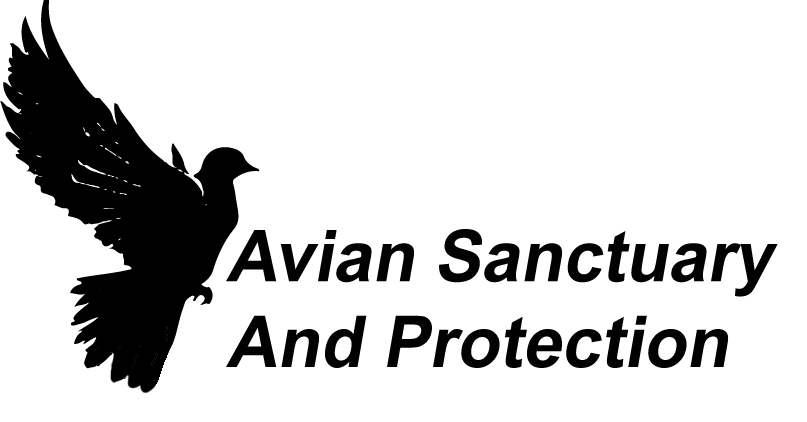
<style>
.page{position:relative;width:807px;height:422px;background:#ffffff}
.page>*{position:absolute;margin:0}
.t1{font:71.5px "Arial-BoldMT";color:#010101;font-style:italic}
</style>
<div class="page">
<p class="t1" style="left:226px;top:229px;width:552px;height:139px">Avian Sanctuary<br>And Protection</p>
</div>
